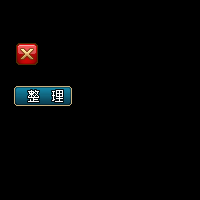
<style>
.page{position:relative;width:200px;height:200px;background:#000000}
.page>*{position:absolute;margin:0}
.t1{font:12px "SimSun";color:#ffffff}
</style>
<div class="page">
<p class="t1" style="left:28px;top:90px;width:35px;height:12px">整  理</p>
<p class="t1" style="left:28px;top:90px;width:35px;height:12px">整  理</p>
<p class="t1" style="left:28px;top:90px;width:35px;height:12px">整  理</p>
</div>
